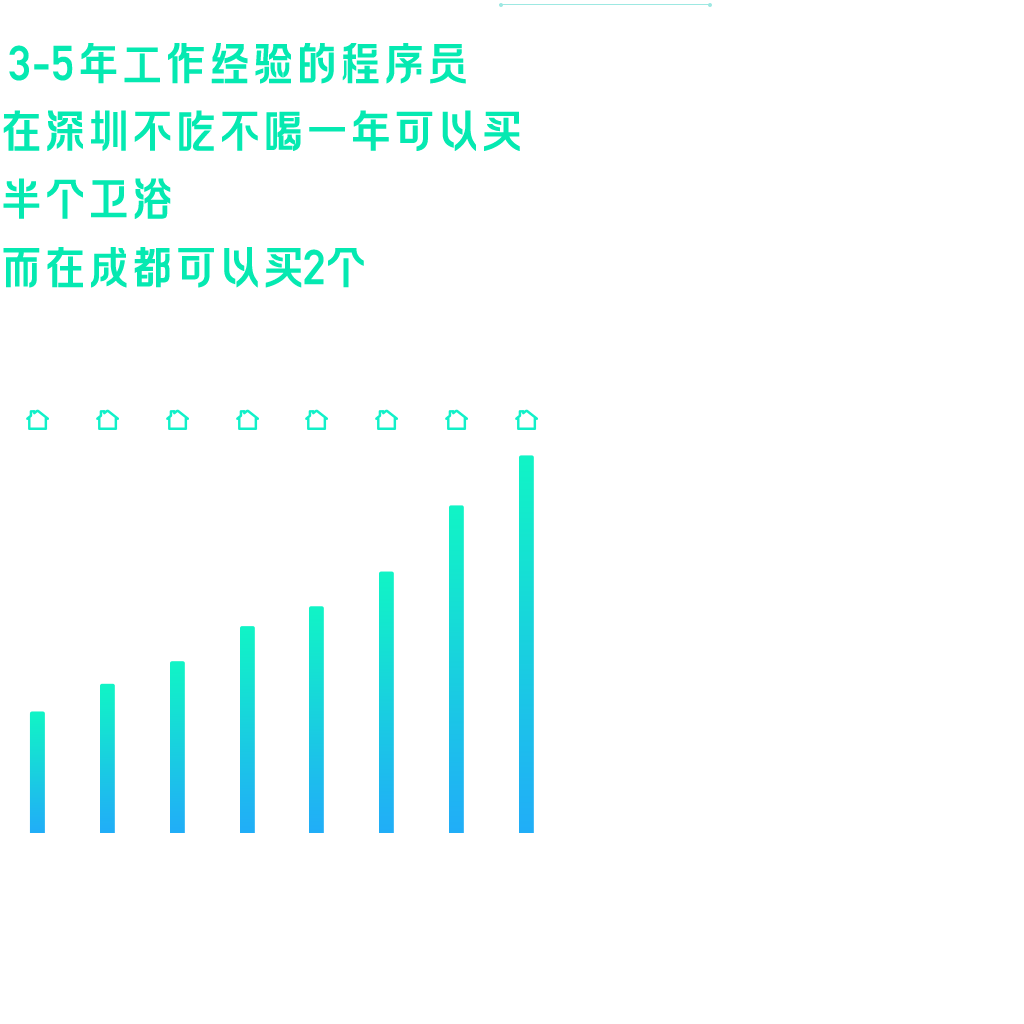
<style>
.page{position:relative;width:1024px;height:1024px;background:#ffffff}
.page>*{position:absolute;margin:0}
.t1{font:48px/34px "FZLAGBTTS_ZHONG--GB1-0";letter-spacing:-0.09em;color:#05e9b1;text-transform:uppercase}
.t2{font:48px/34px "DINAlternate-Bold";color:#05e9b1;text-transform:uppercase}
.t3{font:48px/34px "DINAlternate-Bold";letter-spacing:-0.09em;color:#05e9b1;text-transform:uppercase}
</style>
<div class="page">
<p class="t1" style="left:3px;top:43px;width:517px;height:245px"><span class="t2"> 3-5</span>年工作经验的程序员<br><br>在深圳不吃不喝一年可以买<br><br>半个卫浴<br><br>而在成都可以买<span class="t3">2</span>个</p>
</div>
